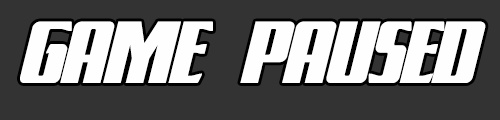
<style>
.page{position:relative;width:500px;height:120px;background:#333333}
.page>*{position:absolute;margin:0}
.t1{font:81.2px "FlightLegion";letter-spacing:-0.025em;color:#fefefe}
</style>
<div class="page">
<p class="t1" style="left:20px;top:21px;width:466px;height:62px">GAME  PAUSED</p>
</div>
